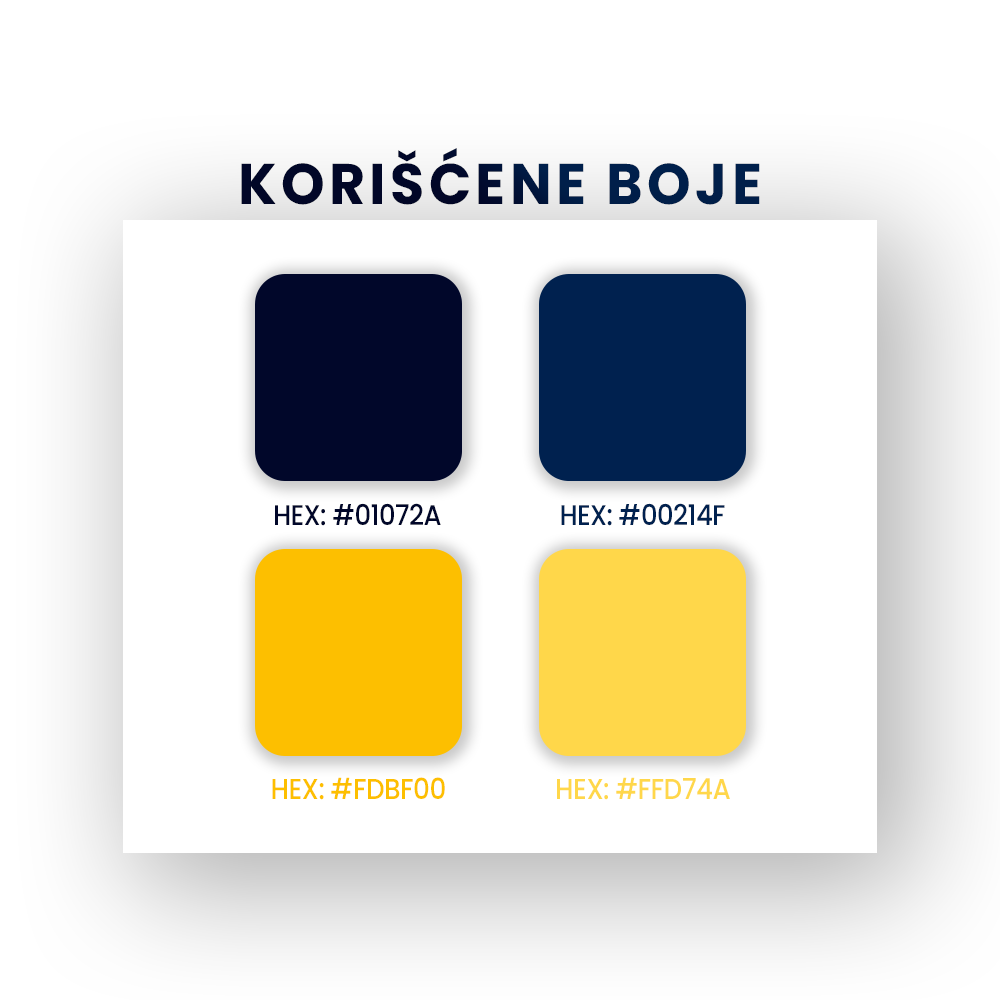
<style>
.page{position:relative;width:1000px;height:1000px;background:#ffffff}
.page>*{position:absolute;margin:0}
.t1{font:57.2px "Poppins-Bold";letter-spacing:0.08em;text-transform:uppercase;scale:0.97 1}
.t2{font:28.5px "Poppins-Medium";letter-spacing:-0.02em;color:#01072a;scale:0.91 1}
.t3{font:28.5px "Poppins-Medium";letter-spacing:-0.02em;color:#00214f;scale:0.91 1}
.t4{font:28.8px "Poppins-Medium";letter-spacing:-0.02em;color:#fdbf00;scale:0.91 1}
.t5{font:28.8px "Poppins-Medium";letter-spacing:-0.02em;color:#ffd74a;scale:0.91 1}
</style>
<div class="page">
<p class="t1" style="left:241px;top:148px;width:519px;height:57px">Korišćene boje</p>
<p class="t2" style="left:275px;top:503px;width:166px;height:23px">HEX: #01072A</p>
<p class="t3" style="left:561px;top:503px;width:164px;height:23px">HEX: #00214F</p>
<p class="t4" style="left:272px;top:777px;width:173px;height:23px">HEX: #FDBF00</p>
<p class="t5" style="left:557px;top:777px;width:173px;height:23px">HEX: #FFD74A</p>
</div>
